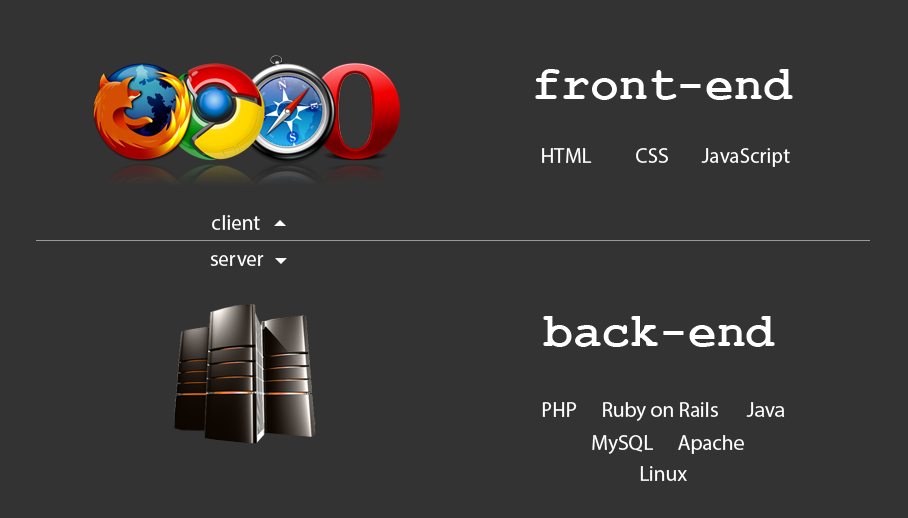
<style>
.page{position:relative;width:908px;height:518px;background:#333333}
.page>*{position:absolute;margin:0}
.t1{font:48px "CourierNewPS-BoldMT";color:#ffffff}
.t2{font:21px "MyriadPro-Regular";color:#ffffff}
</style>
<div class="page">
<p class="t1" style="left:535px;top:69px;width:258px;height:31px">front-end</p>
<p class="t2" style="left:542px;top:148px;width:50px;height:15px">HTML</p>
<p class="t2" style="left:636px;top:148px;width:32px;height:15px">CSS</p>
<p class="t2" style="left:701px;top:148px;width:89px;height:19px">JavaScript</p>
<p class="t2" style="left:212px;top:215px;width:48px;height:15px">client</p>
<p class="t2" style="left:210px;top:255px;width:54px;height:11px">server</p>
<p class="t1" style="left:543px;top:316px;width:232px;height:31px">back-end</p>
<p class="t2" style="left:542px;top:402px;width:35px;height:15px">PHP</p>
<p class="t2" style="left:603px;top:402px;width:115px;height:19px">Ruby on Rails</p>
<p class="t2" style="left:746px;top:402px;width:39px;height:15px">Java</p>
<p class="t2" style="left:592px;top:435px;width:61px;height:19px">MySQL</p>
<p class="t2" style="left:678px;top:435px;width:66px;height:19px">Apache</p>
<p class="t2" style="left:640px;top:466px;width:47px;height:15px">Linux</p>
</div>
